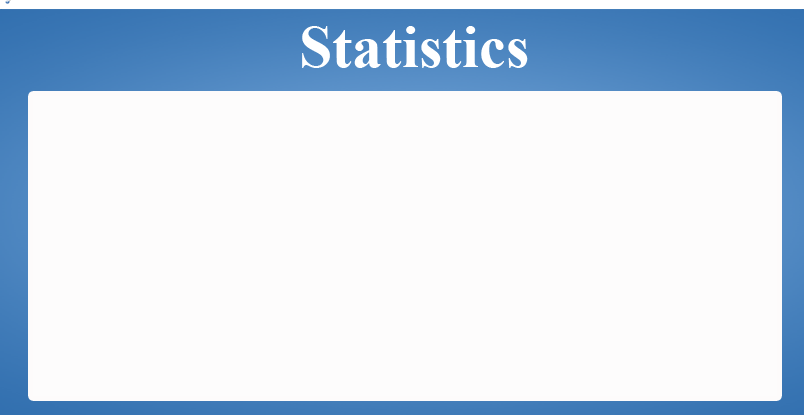
<style>
.page{position:relative;width:804px;height:415px;background:#fdfcfc}
.page>*{position:absolute;margin:0}
.t1{font:60px "TimesNewRomanPS-BoldMT";color:#ffffff}
</style>
<div class="page">
<p class="t1" style="left:302px;top:26px;width:226px;height:42px">Statistics</p>
</div>
